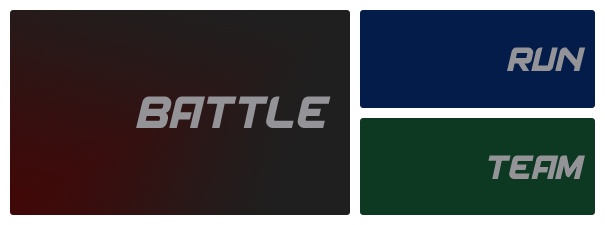
<style>
.page{position:relative;width:605px;height:225px}
.page>*{position:absolute;margin:0}
.t1{font:36px "Spantarandemo";letter-spacing:0.02em;color:#949498}
.t2{font:48px "Spantarandemo";letter-spacing:0.02em;color:#949498}
</style>
<div class="page">
<p class="t1" style="left:507px;top:47px;width:78px;height:24px">RUN</p>
<p class="t2" style="left:136px;top:96px;width:195px;height:32px">BATTLE</p>
<p class="t1" style="left:488px;top:155px;width:97px;height:24px">TEAM</p>
</div>
